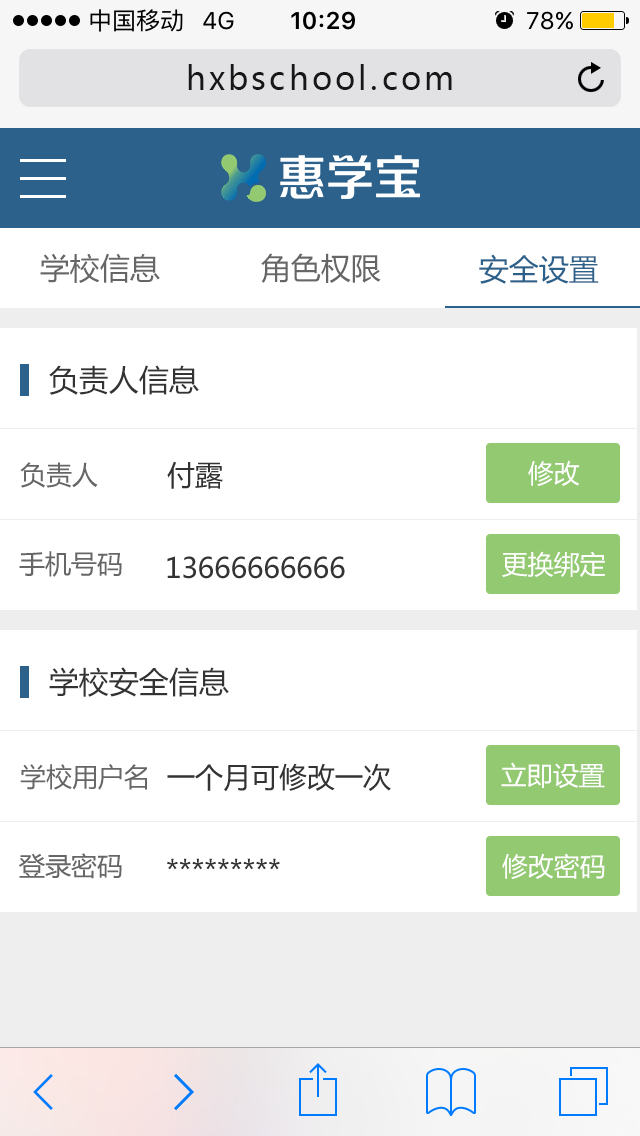
<style>
.page{position:relative;width:640px;height:1136px;background:#ffffff}
.page>*{position:absolute;margin:0}
.t1{font:32px "MicrosoftYaHei";letter-spacing:0.1em;color:#171717}
.t2{font:30px "MicrosoftYaHei";color:#666666}
.t3{font:30px "MicrosoftYaHei";color:#2c618b}
.t4{font:30px "MicrosoftYaHei";color:#333333}
.t5{font:26px "MicrosoftYaHei";color:#666666}
.t6{font:28px "MicrosoftYaHei";color:#333333}
.t7{font:26px "MicrosoftYaHei";color:#ffffff}
</style>
<div class="page">
<p class="t1" style="left:188px;top:64px;width:264px;height:26px">hxbschool.com</p>
<p class="t2" style="left:40px;top:253px;width:120px;height:30px">学校信息</p>
<p class="t2" style="left:261px;top:253px;width:120px;height:30px">角色权限</p>
<p class="t3" style="left:479px;top:254px;width:120px;height:30px">安全设置</p>
<p class="t4" style="left:49px;top:365px;width:150px;height:30px">负责人信息</p>
<p class="t5" style="left:20px;top:462px;width:78px;height:26px">负责人</p>
<p class="t6" style="left:167px;top:461px;width:56px;height:28px">付露</p>
<p class="t7" style="left:528px;top:460px;width:52px;height:26px">修改</p>
<p class="t5" style="left:19px;top:551px;width:103px;height:26px">手机号码</p>
<p class="t6" style="left:167px;top:556px;width:178px;height:23px">13666666666</p>
<p class="t7" style="left:502px;top:551px;width:104px;height:26px">更换绑定</p>
<p class="t4" style="left:49px;top:667px;width:180px;height:30px">学校安全信息</p>
<p class="t5" style="left:20px;top:764px;width:127px;height:26px">学校用户名</p>
<p class="t6" style="left:167px;top:763px;width:224px;height:29px">一个月可修改一次</p>
<p class="t7" style="left:501px;top:762px;width:104px;height:26px">立即设置</p>
<p class="t5" style="left:19px;top:853px;width:103px;height:26px">登录密码</p>
<p class="t7" style="left:502px;top:853px;width:103px;height:26px">修改密码</p>
<p class="t6" style="left:167px;top:858px;width:113px;height:12px">*********</p>
</div>
